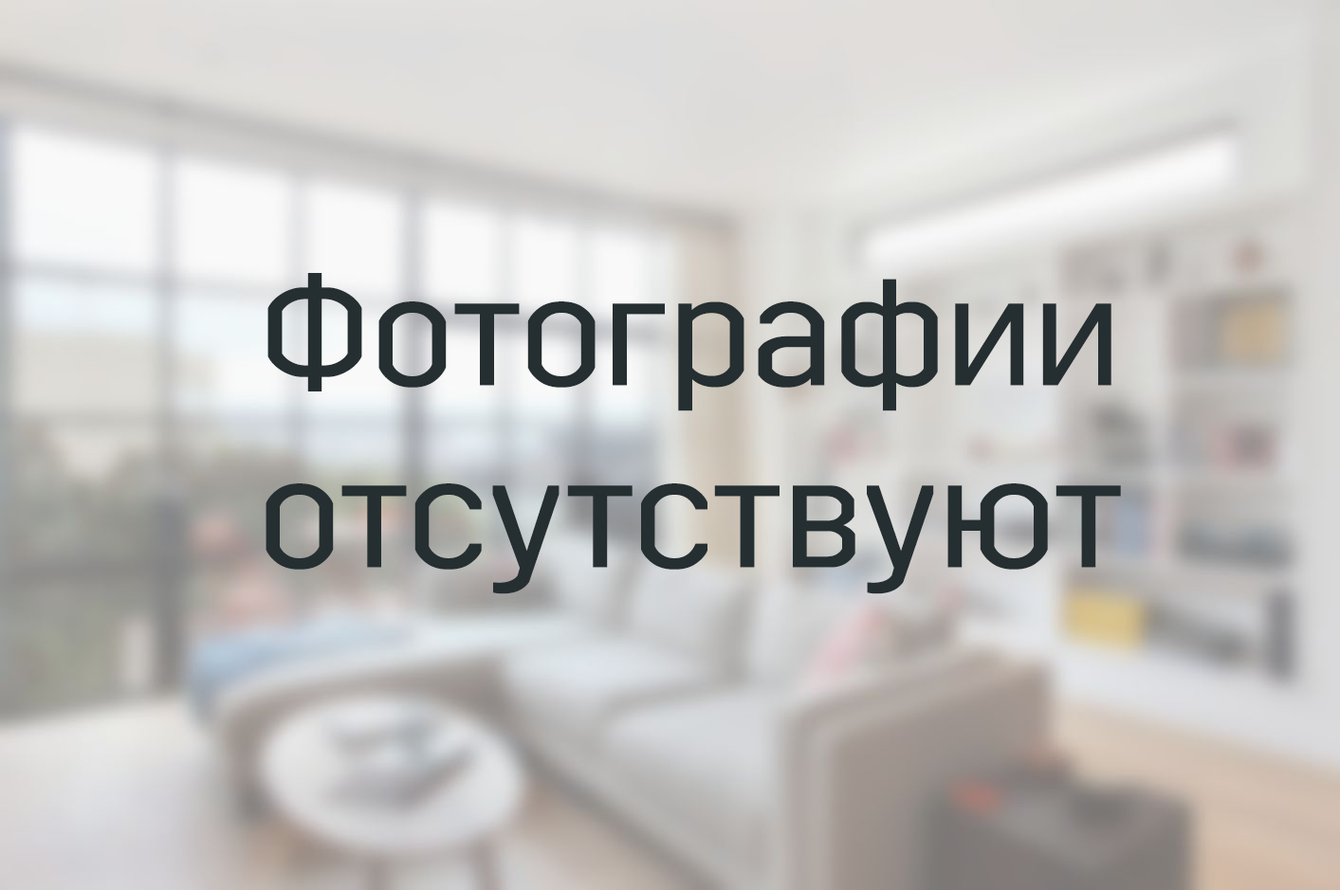
<style>
.page{position:relative;width:1340px;height:890px}
.page>*{position:absolute;margin:0}
.t1{font:151.7px "CadillacSansA-Book";color:#252f32}
</style>
<div class="page">
<p class="t1" style="left:265px;top:273px;width:856px;height:321px;text-align:center">Фотографии<br>отсутствуют</p>
</div>
